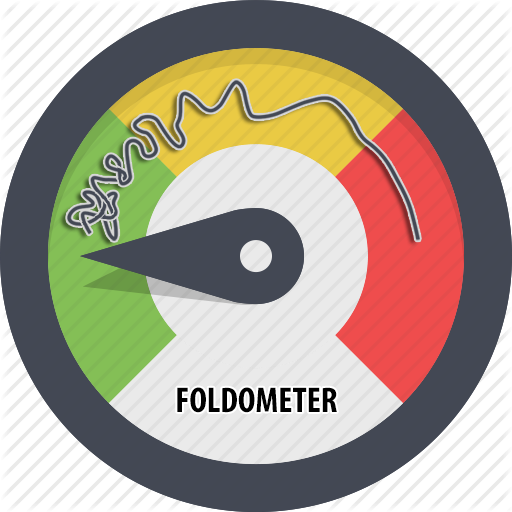
<style>
.page{position:relative;width:512px;height:512px;background:#434854}
.page>*{position:absolute;margin:0}
.t1{font:36px "MyriadPro-BoldCond";color:#000000}
</style>
<div class="page">
<p class="t1" style="left:177px;top:387px;width:160px;height:26px">FOLDOMETER</p>
</div>
